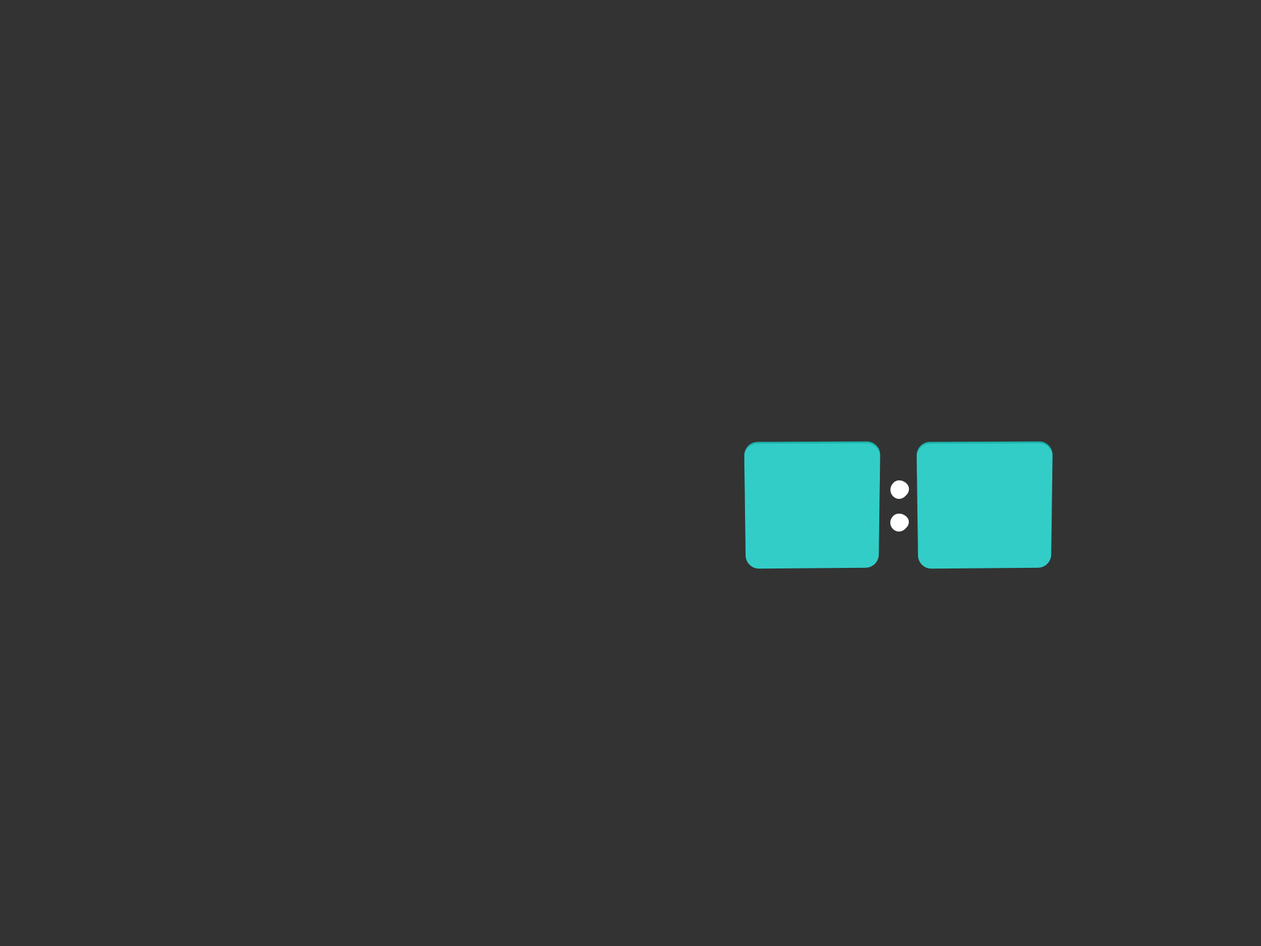
<style>
.page{position:relative;width:1261px;height:946px;background:#333333}
.page>*{position:absolute;margin:0}
.t1{font:123.1px "DSGoose";color:#ffffff}
</style>
<div class="page">
<p class="t1" style="left:890px;top:480px;width:19px;height:51px">:</p>
</div>
